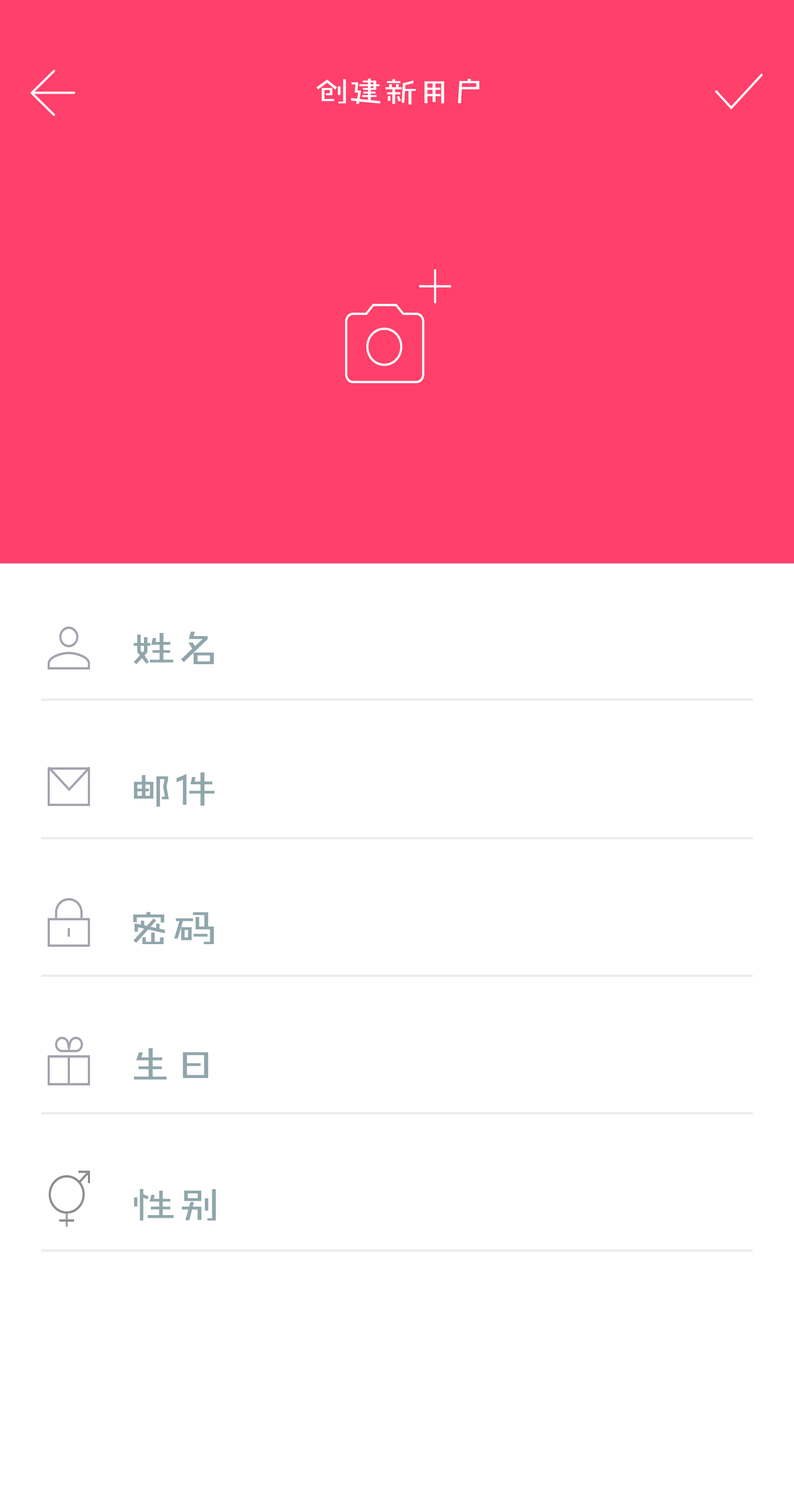
<style>
.page{position:relative;width:794px;height:1503px;background:#ffffff}
.page>*{position:absolute;margin:0}
.t1{font:33.6px "FZJHJW--GB1-0";letter-spacing:0.02em;color:#ffffff}
.t2{font:44.1px "FZJHJW--GB1-0";letter-spacing:0.02em;color:#90a6ab}
</style>
<div class="page">
<p class="t1" style="left:316px;top:78px;width:163px;height:27px">创建新用户</p>
<p class="t2" style="left:133px;top:631px;width:81px;height:33px">姓名</p>
<p class="t2" style="left:134px;top:772px;width:80px;height:35px">邮件</p>
<p class="t2" style="left:133px;top:912px;width:81px;height:32px">密码</p>
<p class="t2" style="left:134px;top:1048px;width:74px;height:31px">生日</p>
<p class="t2" style="left:134px;top:1188px;width:82px;height:33px">性别</p>
</div>
